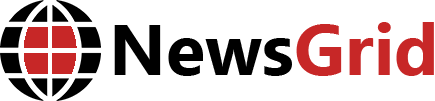
<style>
.page{position:relative;width:435px;height:101px;background:#ffffff}
.page>*{position:absolute;margin:0}
.t1{font:72px "Ebrima-Bold";color:#000000}
.t2{font:72px "Ebrima-Bold";color:#c72727}
</style>
<div class="page">
<p class="t1" style="left:114px;top:22px;width:320px;height:54px">News<span class="t2">Grid</span></p>
</div>
